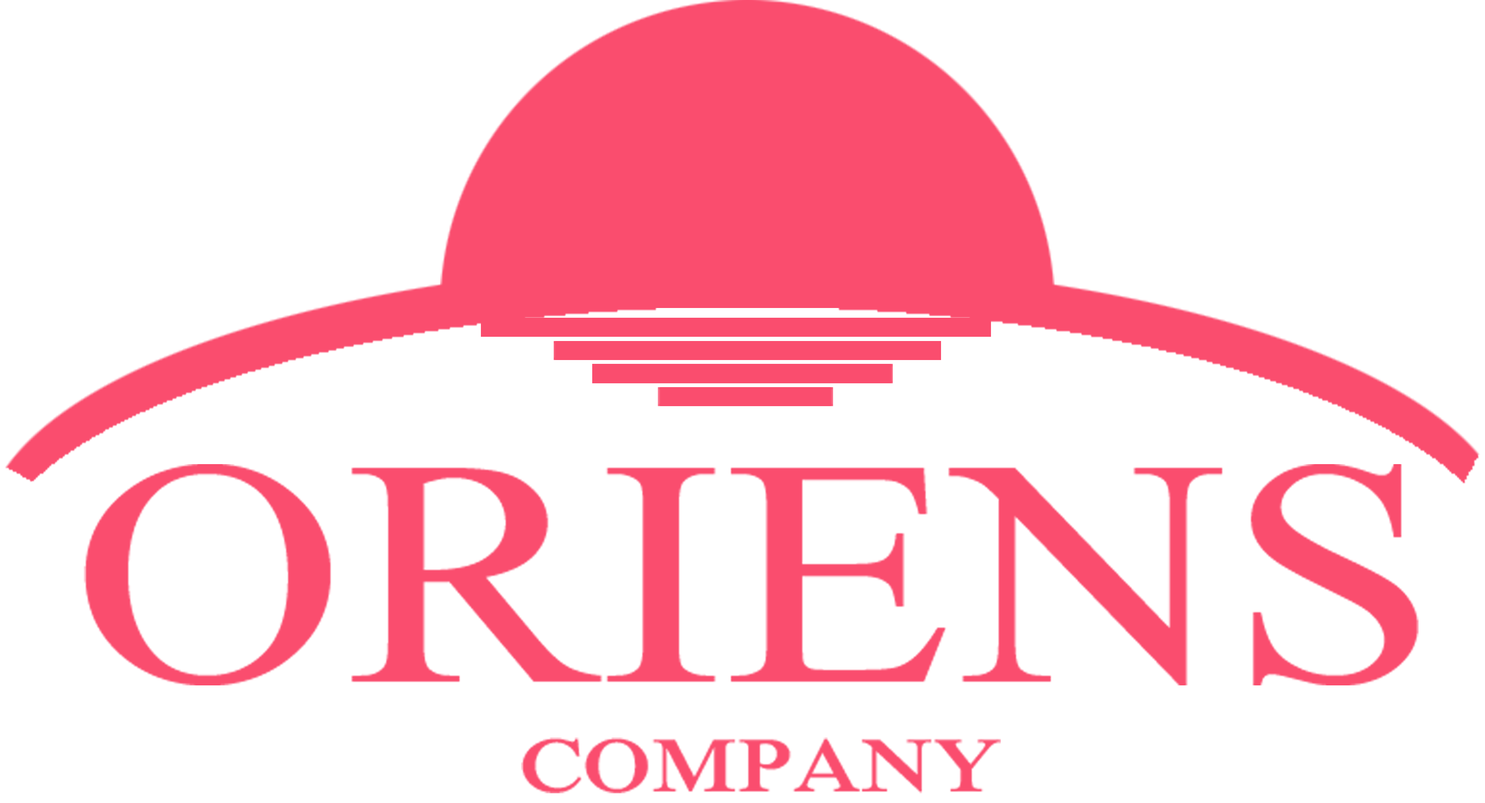
<style>
.page{position:relative;width:1485px;height:803px;background:#ffffff}
.page>*{position:absolute;margin:0}
.t1{font:322.4px "IskoolaPota";color:#fa4d6e;scale:1.17 1}
.t2{font:78px "IskoolaPota-Bold";color:#fa4d6e;scale:1.08 1}
</style>
<div class="page">
<p class="t1" style="left:84px;top:464px;width:1334px;height:222px">ORIENS</p>
<p class="t2" style="left:521px;top:738px;width:479px;height:55px">COMPANY</p>
</div>
